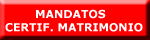
<style>
.page{position:relative;width:150px;height:40px;background:#ff0000}
.page>*{position:absolute;margin:0}
.t1{font:11px "Verdana-Bold";color:#ffffff}
</style>
<div class="page">
<p class="t1" style="left:5px;top:9px;width:138px;height:23px">MANDATOS<br>CERTIF. MATRIMONIO</p>
</div>
